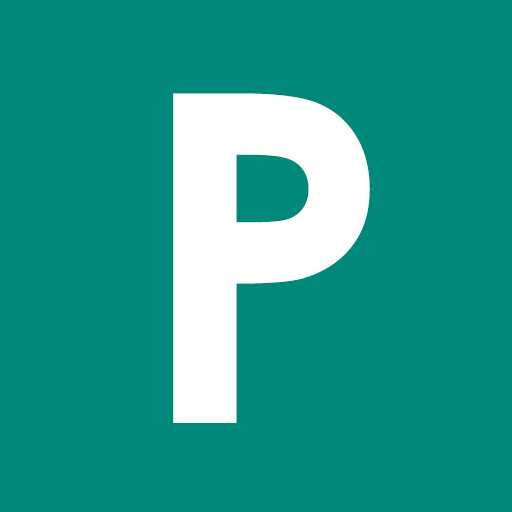
<style>
.page{position:relative;width:512px;height:512px;background:#00897b}
.page>*{position:absolute;margin:0}
.t1{font:458.7px "CenturyGothic-Bold";color:#ffffff}
</style>
<div class="page">
<p class="t1" style="left:173px;top:93px;width:197px;height:330px">P</p>
</div>
